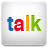
<style>
.page{position:relative;width:48px;height:48px}
.page>*{position:absolute;margin:0}
.t1{font:21.6px "Helvetica-Bold";letter-spacing:-0.005em;color:#1172bd;scale:0.94 1}
.t2{font:21.6px "Helvetica-Bold";letter-spacing:-0.005em;color:#ff0021;scale:0.94 1}
.t3{font:21.6px "Helvetica-Bold";letter-spacing:-0.005em;color:#ffa401;scale:0.94 1}
.t4{font:21.6px "Helvetica-Bold";letter-spacing:-0.005em;color:#80c200;scale:0.94 1}
</style>
<div class="page">
<p class="t1" style="left:7px;top:15px;width:35px;height:16px">t<span class="t2">a</span><span class="t3">l</span><span class="t4">k</span></p>
</div>
